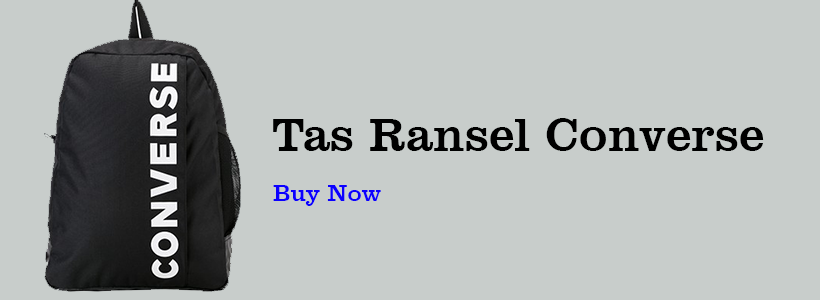
<style>
.page{position:relative;width:820px;height:300px;background:#c8cdcb}
.page>*{position:absolute;margin:0}
.t1{font:48px "ClarendonBT-Roman";color:#000000}
.t2{font:24px "ClarendonBT-Roman";color:#0c00ff}
</style>
<div class="page">
<p class="t1" style="left:273px;top:118px;width:491px;height:33px">Tas Ransel Converse</p>
<p class="t2" style="left:273px;top:185px;width:108px;height:21px">Buy Now</p>
</div>
